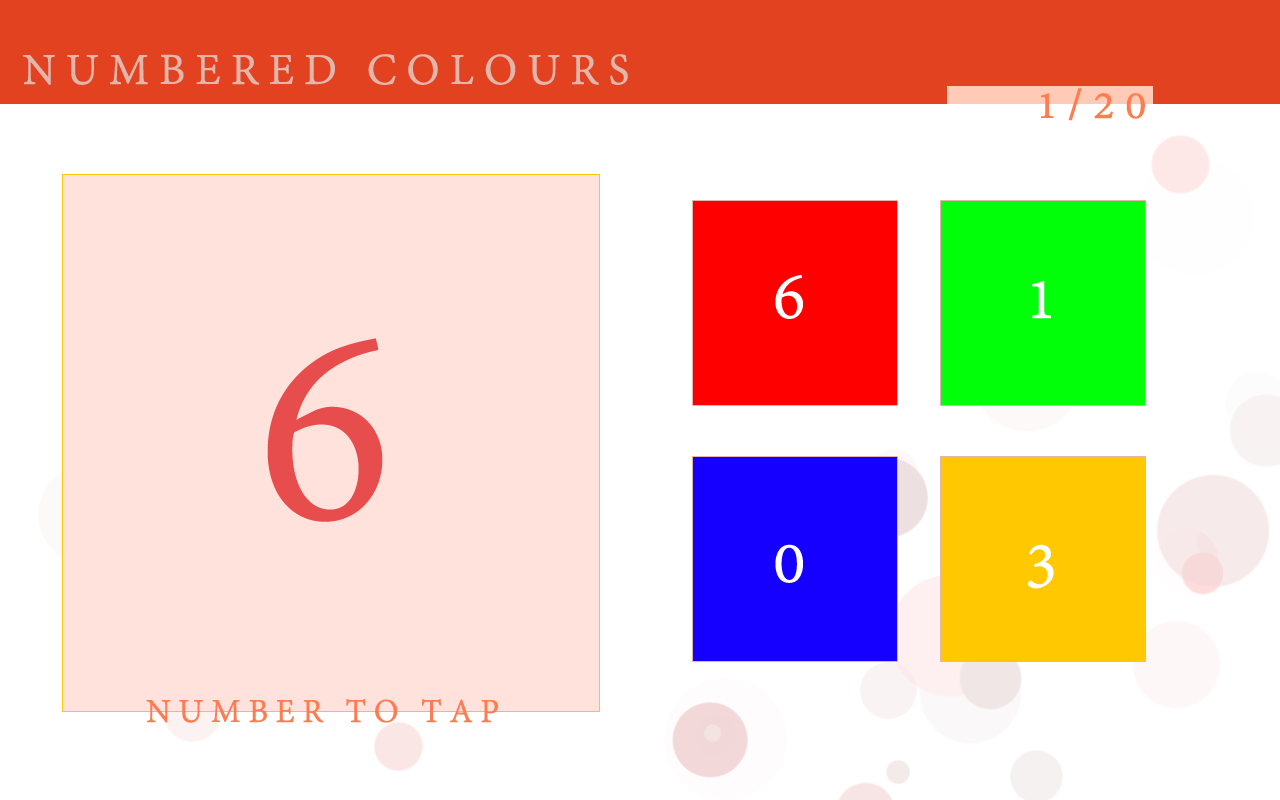
<style>
.page{position:relative;width:1280px;height:800px;background:#ffffff}
.page>*{position:absolute;margin:0}
.t1{font:48px "AdobeDevanagari-Regular";letter-spacing:0.2em;color:#e3b6ac;text-transform:uppercase;font-weight:bold}
.t2{font:48px "AdobeDevanagari-Regular";letter-spacing:0.2em;color:#ff7c50;text-transform:uppercase;font-weight:bold}
.t3{font:72px "AdobeDevanagari-Regular";letter-spacing:0.2em;color:#ffffff;text-transform:uppercase;font-weight:bold}
.t4{font:300px "AdobeDevanagari-Regular";letter-spacing:0.2em;color:#e84d4d;text-transform:uppercase;font-weight:bold}
.t5{font:36px "AdobeDevanagari-Regular";letter-spacing:0.2em;color:#ff7c50;text-transform:uppercase;font-weight:bold}
</style>
<div class="page">
<p class="t1" style="left:23px;top:54px;width:605px;height:31px">Numbered Colours</p>
<p class="t2" style="left:1041px;top:88px;width:104px;height:33px">1/20</p>
<p class="t3" style="left:775px;top:274px;width:28px;height:45px">6</p>
<p class="t3" style="left:1032px;top:280px;width:19px;height:39px">1</p>
<p class="t4" style="left:267px;top:338px;width:116px;height:184px">6</p>
<p class="t3" style="left:775px;top:544px;width:28px;height:39px">0</p>
<p class="t3" style="left:1028px;top:544px;width:26px;height:45px">3</p>
<p class="t5" style="left:146px;top:699px;width:352px;height:24px">Number to tap</p>
</div>
